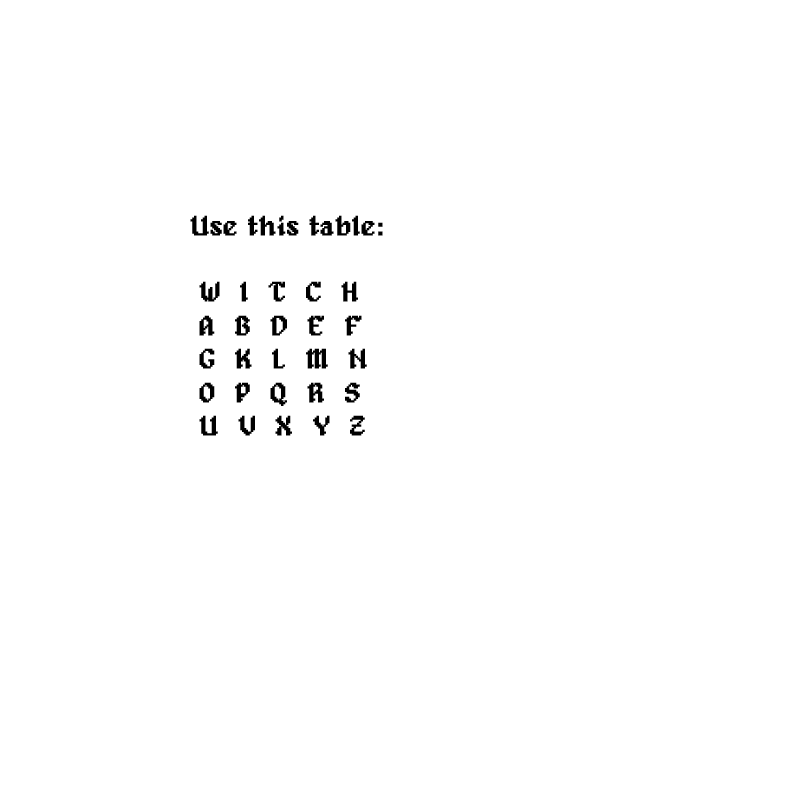
<style>
.page{position:relative;width:800px;height:800px;background:#ffffff}
.page>*{position:absolute;margin:0}
.t1{font:27.9px "Alagard";color:#000000;font-weight:bold}
</style>
<div class="page">
<p class="t1" style="left:190px;top:215px;width:193px;height:221px">Use this table:<br><br>  W  I  T  C  H<br>  A  B  D  E  F<br>  G  K  L  M  N<br>  O  P  Q  R  S<br>  U  V  X  Y  Z</p>
</div>
